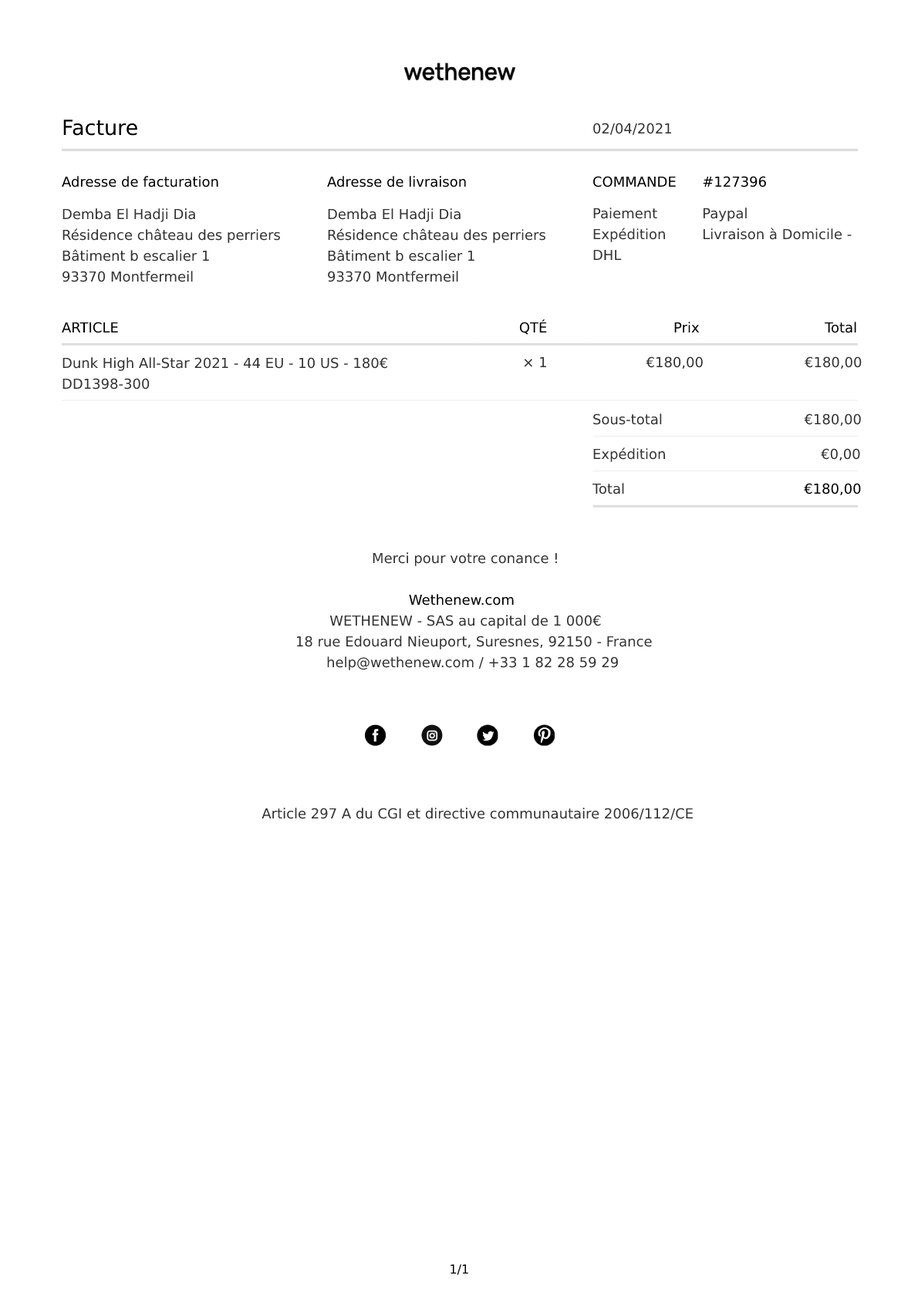
<style>
.page{position:relative;width:918px;height:1299px;background:#ffffff}
.page>*{position:absolute;margin:0}
.t1{font:20.8px "DejaVuSans";color:#000000}
.t2{font:13.9px "DejaVuSans";color:#333333}
.t3{font:13.9px "DejaVuSans";color:#000000}
.t4{font:13.9px/20.8px "DejaVuSans";color:#333333}
.t5{font:12.3px "DejaVuSans";color:#000000}
</style>
<div class="page">
<p class="t1" style="left:63px;top:120px;width:74px;height:16px">Facture</p>
<p class="t2" style="left:593px;top:123px;width:79px;height:12px">02/04/2021</p>
<p class="t3" style="left:62px;top:176px;width:156px;height:11px">Adresse de facturation</p>
<p class="t3" style="left:327px;top:176px;width:139px;height:11px">Adresse de livraison</p>
<p class="t3" style="left:592px;top:176px;width:84px;height:11px">COMMANDE</p>
<p class="t3" style="left:703px;top:176px;width:63px;height:11px">#127396</p>
<p class="t4" style="left:62px;top:208px;width:218px;height:74px"><span class="t2">Demba El Hadji Dia</span><br>Résidence château des perriers<br>Bâtiment b escalier 1<br>93370 Montfermeil</p>
<p class="t4" style="left:328px;top:208px;width:217px;height:74px">Demba El Hadji Dia<br>Résidence château des perriers<br>Bâtiment b escalier 1<br>93370 Montfermeil</p>
<p class="t2" style="left:593px;top:208px;width:64px;height:11px">Paiement</p>
<p class="t2" style="left:704px;top:208px;width:43px;height:13px">Paypal</p>
<p class="t2" style="left:593px;top:228px;width:72px;height:14px">Expédition</p>
<p class="t2" style="left:704px;top:228px;width:148px;height:12px">Livraison à Domicile -</p>
<p class="t2" style="left:593px;top:249px;width:29px;height:11px">DHL</p>
<p class="t3" style="left:62px;top:322px;width:56px;height:11px">ARTICLE</p>
<p class="t3" style="left:519px;top:319px;width:28px;height:16px">QTÉ</p>
<p class="t3" style="left:674px;top:322px;width:26px;height:10px">Prix</p>
<p class="t3" style="left:825px;top:322px;width:31px;height:11px">Total</p>
<p class="t4" style="left:62px;top:357px;width:325px;height:33px">Dunk High All-Star 2021 - 44 EU - 10 US - 180€<br>DD1398-300</p>
<p class="t2" style="left:524px;top:356px;width:22px;height:11px">× 1</p>
<p class="t2" style="left:646px;top:356px;width:57px;height:13px">€180,00</p>
<p class="t2" style="left:805px;top:356px;width:57px;height:13px">€180,00</p>
<p class="t2" style="left:593px;top:413px;width:69px;height:12px">Sous-total</p>
<p class="t2" style="left:804px;top:413px;width:57px;height:14px">€180,00</p>
<p class="t2" style="left:593px;top:447px;width:72px;height:15px">Expédition</p>
<p class="t2" style="left:821px;top:448px;width:39px;height:13px">€0,00</p>
<p class="t2" style="left:592px;top:483px;width:32px;height:11px">Total</p>
<p class="t3" style="left:804px;top:483px;width:57px;height:13px">€180,00</p>
<p class="t2" style="left:373px;top:552px;width:184px;height:14px">Merci pour votre conance !</p>
<p class="t3" style="left:409px;top:594px;width:105px;height:12px">Wethenew.com</p>
<p class="t2" style="left:329px;top:615px;width:272px;height:14px">WETHENEW - SAS au capital de 1 000€</p>
<p class="t2" style="left:296px;top:636px;width:356px;height:14px">18 rue Edouard Nieuport, Suresnes, 92150 - France</p>
<p class="t2" style="left:327px;top:656px;width:291px;height:14px">help@wethenew.com / +33 1 82 28 59 29</p>
<p class="t2" style="left:262px;top:808px;width:431px;height:12px">Article 297 A du CGI et directive communautaire 2006/112/CE</p>
<p class="t5" style="left:450px;top:1264px;width:18px;height:11px">1/1</p>
</div>
